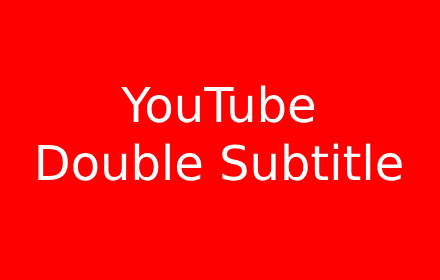
<style>
.page{position:relative;width:440px;height:280px;background:#ff0000}
.page>*{position:absolute;margin:0}
.t1{font:48px "DejaVuSans";color:#ffffff}
</style>
<div class="page">
<p class="t1" style="left:38px;top:85px;width:364px;height:96px;text-align:justify">YouTube<br>Double Subtitle</p>
</div>
